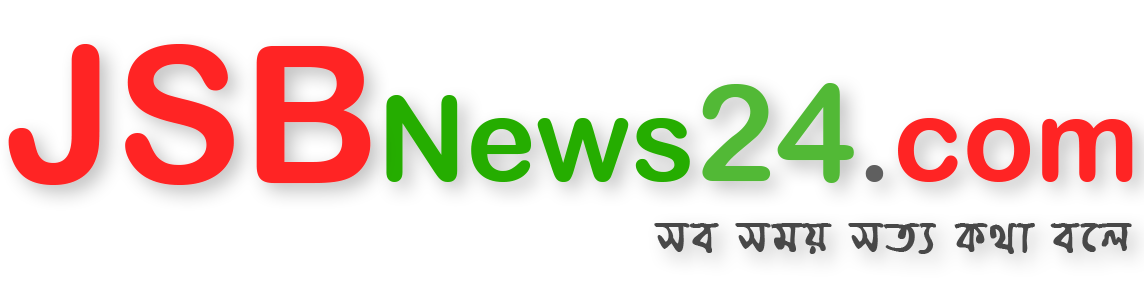
<style>
.page{position:relative;width:1144px;height:290px;background:#ffffff}
.page>*{position:absolute;margin:0}
.t1{font:190.9px "ArialRoundedMTBold";color:#ff2424}
.t2{font:118.2px "ArialRoundedMTBold";color:#25ad00}
.t3{font:135.3px "ArialRoundedMTBold";color:#52b936}
.t4{font:118.2px "ArialRoundedMTBold";color:#5f5f5f}
.t5{font:118.2px "ArialRoundedMTBold";color:#ff2424}
.t6{font:55.5px "ChandrabatiMatraAMJ-Bold";letter-spacing:0.08em;color:#484848}
</style>
<div class="page">
<p class="t1" style="left:8px;top:44px;width:363px;height:141px">JSB</p>
<p class="t2" style="left:386px;top:83px;width:747px;height:100px">News<span class="t3">24</span><span class="t4">.</span><span class="t5">com</span></p>
<p class="t6" style="left:654px;top:223px;width:478px;height:31px">me mgq mZ¨ K_v e‡j</p>
</div>
